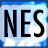
<style>
.page{position:relative;width:48px;height:48px}
.page>*{position:absolute;margin:0}
.t1{font:36px "Futura-CondensedMedium";color:#000000}
</style>
<div class="page">
<p class="t1" style="left:4px;top:9px;width:41px;height:29px">NES</p>
</div>
